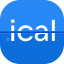
<style>
.page{position:relative;width:64px;height:64px;background:#2787f5}
.page>*{position:absolute;margin:0}
.t1{font:30px "VKSansDisplay-Medium";color:#fafafa}
.t2{font:30px "VKSansDisplay-Medium";letter-spacing:-0.09em;color:#2787f5}
</style>
<div class="page">
<p class="t1" style="left:6px;top:19px;width:49px;height:23px"><span class="t2">.</span>ical</p>
</div>
